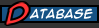
<style>
.page{position:relative;width:99px;height:28px;background:#333333}
.page>*{position:absolute;margin:0}
.t1{font:10.3px "AnimeAce2.0BB-Bold";color:#ffffff}
</style>
<div class="page">
<p class="t1" style="left:29px;top:8px;width:64px;height:11px">atabase</p>
</div>
